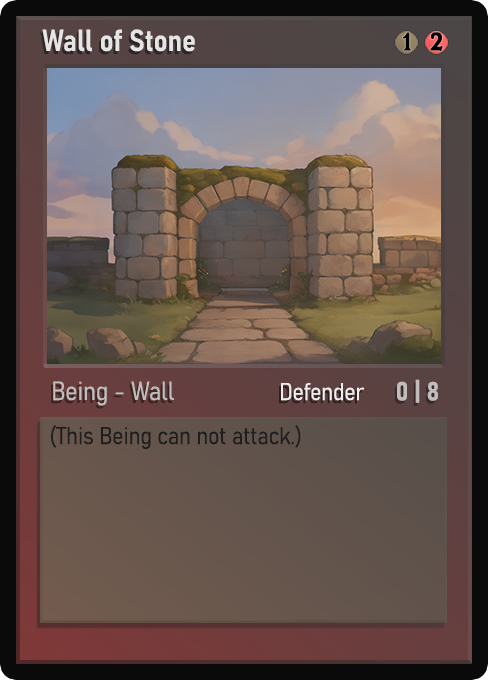
<style>
.page{position:relative;width:488px;height:680px}
.page>*{position:absolute;margin:0}
.t1{font:30px "Bahnschrift-SemiBoldSemiCondensed";color:#f2f2f2;font-weight:bold}
.t2{font:25px "WTRRoycroft";color:#000000;font-weight:bold;scale:1.09 1}
.t3{font:26px "Bahnschrift-LightSemiCondensed";color:#c8c8c8;font-weight:bold}
.t4{font:24px "Bahnschrift-LightSemiCondensed";color:#f0efef;font-weight:bold}
.t5{font:26px "Bahnschrift-BoldSemiCondensed";color:#c1bdbd;font-weight:bold}
.t6{font:24px "Bahnschrift-LightSemiCondensed";color:#1e1e1e;font-weight:bold}
</style>
<div class="page">
<p class="t1" style="left:42px;top:29px;width:153px;height:23px;opacity:0.9">Wall of Stone</p>
<p class="t2" style="left:403px;top:32px;width:8px;height:19px">1</p>
<p class="t2" style="left:430px;top:32px;width:13px;height:19px">2</p>
<p class="t3" style="left:53px;top:381px;width:121px;height:25px;opacity:0.9">Being - Wall</p>
<p class="t4" style="left:281px;top:383px;width:84px;height:18px">Defender</p>
<p class="t5" style="left:397px;top:379px;width:41px;height:24px">0 | 8</p>
<p class="t6" style="left:51px;top:425px;width:250px;height:24px">(This Being can not attack.)</p>
</div>
